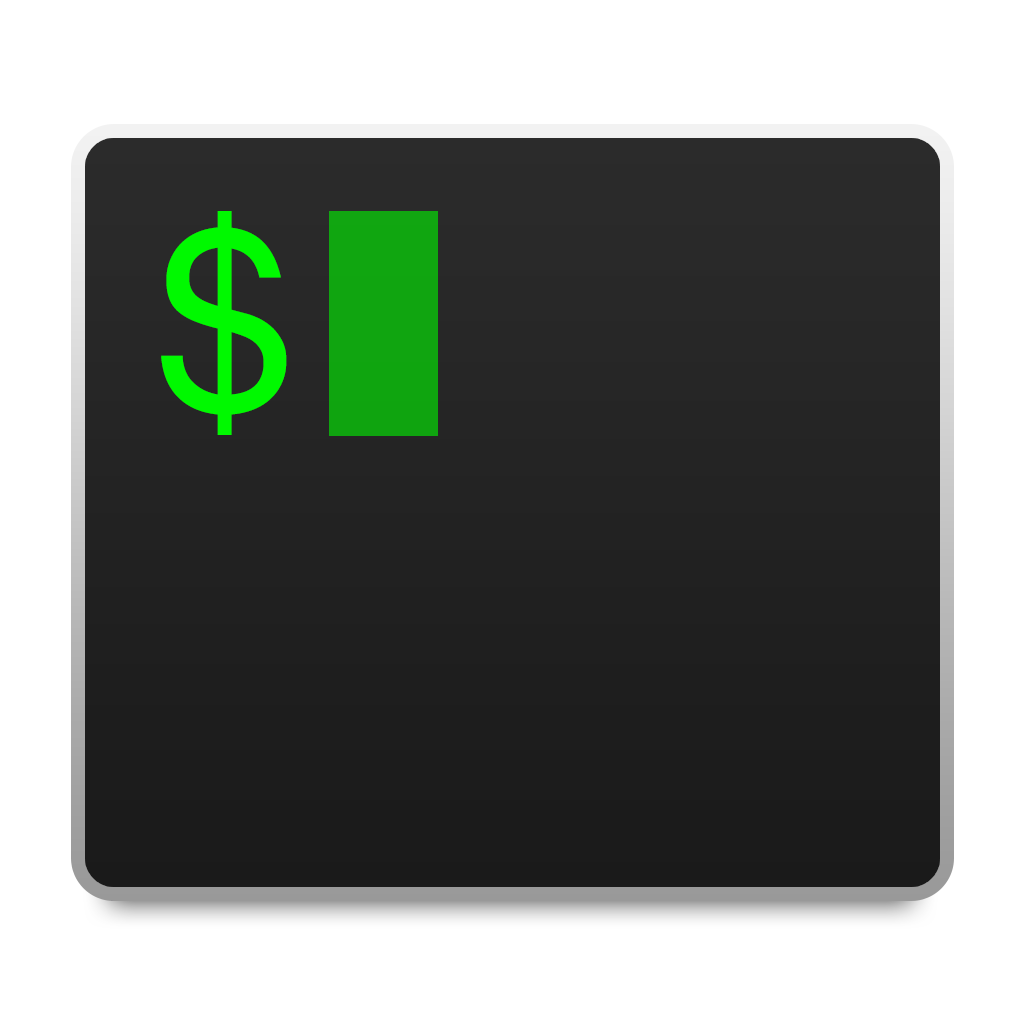
<style>
.page{position:relative;width:1024px;height:1024px;background:#ffffff}
.page>*{position:absolute;margin:0}
.t1{font:250px "HelveticaNeue";color:#00f900}
</style>
<div class="page">
<p class="t1" style="left:161px;top:211px;width:126px;height:224px">$</p>
</div>
